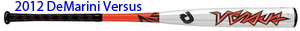
<style>
.page{position:relative;width:300px;height:31px;background:#ffffff}
.page>*{position:absolute;margin:0}
.t1{font:14px "MyriadPro-Regular";color:#0000ff}
</style>
<div class="page">
<p class="t1" style="left:15px;top:1px;width:127px;height:10px">2012 DeMarini Versus</p>
</div>
